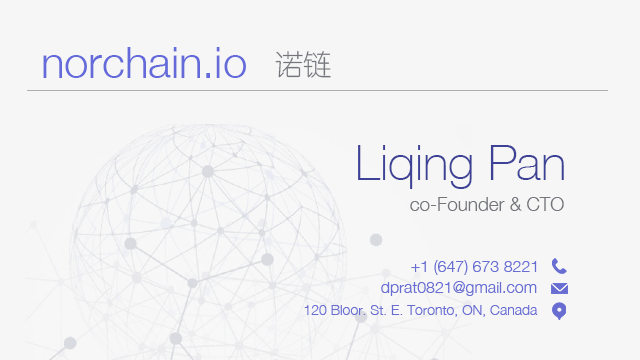
<style>
.page{position:relative;width:640px;height:360px;background:#f6f6f6}
.page>*{position:absolute;margin:0}
.t1{font:43.6px "HelveticaNeue-Light";color:#646ad9}
.t2{font:28.2px "STYuanti-SC-Light";color:#74757b}
.t3{font:48.6px "HelveticaNeue-Thin";color:#3e4297}
.t4{font:18.9px "HelveticaNeue-Light";color:#74757b}
.t5{font:16.1px "HelveticaNeue-Light";color:#686dd2}
.t6{font:14.1px "HelveticaNeue-Light";color:#686dd2}
</style>
<div class="page">
<p class="t1" style="left:43px;top:47px;width:203px;height:31px">norchain.io</p>
<p class="t2" style="left:275px;top:50px;width:56px;height:28px">诺链</p>
<p class="t3" style="left:358px;top:145px;width:206px;height:44px">Liqing Pan</p>
<p class="t4" style="left:410px;top:197px;width:154px;height:14px">co-Founder &amp; CTO</p>
<p class="t5" style="left:411px;top:260px;width:126px;height:15px">+1 (647) 673 8221</p>
<p class="t5" style="left:381px;top:281px;width:156px;height:15px">dprat0821@gmail.com</p>
<p class="t6" style="left:304px;top:305px;width:234px;height:12px">120 Bloor. St. E. Toronto, ON, Canada</p>
</div>
